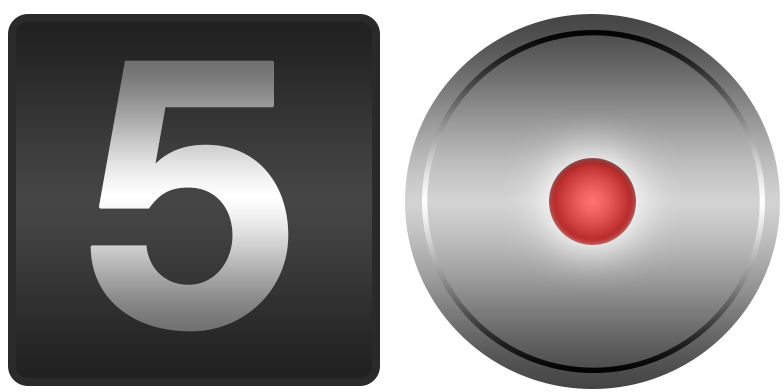
<style>
.page{position:relative;width:784px;height:392px}
.page>*{position:absolute;margin:0}
.t1{font:375.2px "HelveticaNeueLTStd-Bd";font-weight:bold}
</style>
<div class="page">
<p class="t1" style="left:90px;top:60px;width:199px;height:272px">5</p>
</div>
